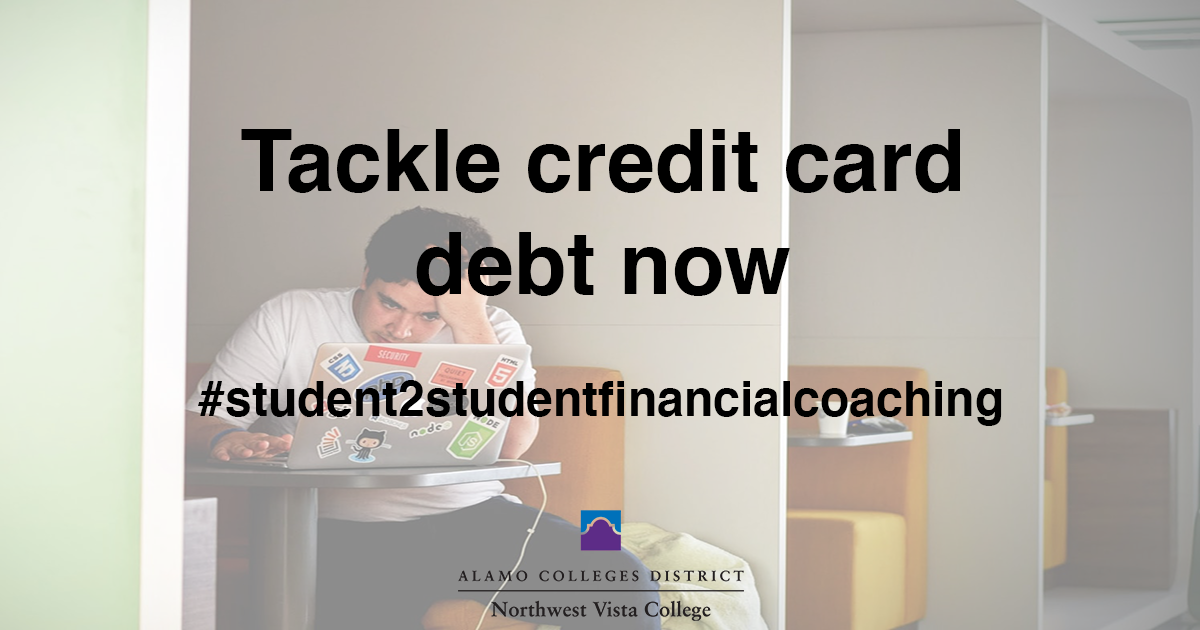
<style>
.page{position:relative;width:1200px;height:630px}
.page>*{position:absolute;margin:0}
.t1{font:86px "Helvetica-Bold";color:#000000}
.t2{font:48px "Helvetica-Bold";color:#000000}
</style>
<div class="page">
<p class="t1" style="left:241px;top:129px;width:719px;height:167px;text-align:center">Tackle credit card<br>debt now</p>
<p class="t2" style="left:198px;top:380px;width:804px;height:46px">#student2studentfinancialcoaching</p>
</div>
